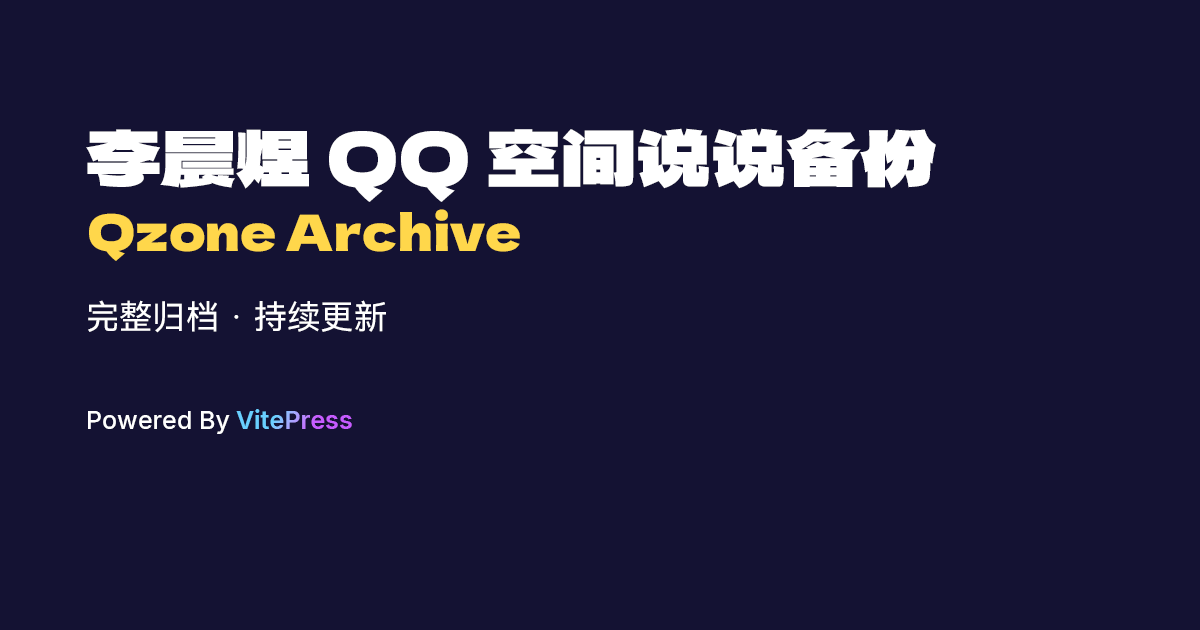
<style>
.page{position:relative;width:1200px;height:630px;background:#141233}
.page>*{position:absolute;margin:0}
.t1{font:75px "LogoSCUnboundedSans-Regular";color:#ffffff;text-transform:uppercase}
.t2{font:50px "LogoSCUnboundedSans-Regular";color:#ffd74b}
.t3{font:33.3px "HarmonyOS_Sans_SC";color:#ffffff}
.t4{font:25px "Inter-Medium";color:#ffffff}
.t5{font:25px "Inter-SemiBold"}
</style>
<div class="page">
<p class="t1" style="left:86px;top:128px;width:850px;height:74px">李晨煜 QQ 空间说说备份</p>
<p class="t2" style="left:89px;top:209px;width:431px;height:52px">Qzone Archive</p>
<p class="t3" style="left:88px;top:300px;width:298px;height:33px">完整归档 · 持续更新</p>
<p class="t4" style="left:88px;top:411px;width:142px;height:23px">Powered By</p>
<p class="t5" style="left:236px;top:409px;width:116px;height:20px">VitePress</p>
</div>
